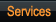
<style>
.page{position:relative;width:56px;height:22px}
.page>*{position:absolute;margin:0}
.t1{font:14px "ArialNarrow";color:#ff9933}
</style>
<div class="page">
<p class="t1" style="left:7px;top:5px;width:44px;height:12px">Services</p>
</div>
